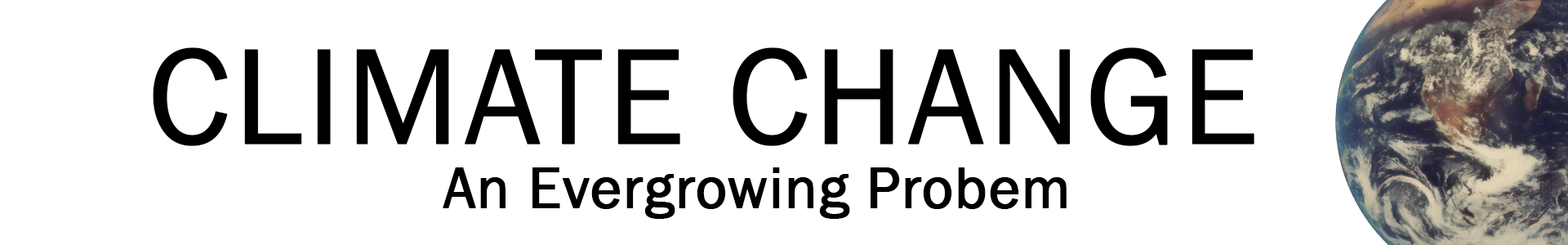
<style>
.page{position:relative;width:1568px;height:245px;background:#ffffff}
.page>*{position:absolute;margin:0}
.t1{font:141.7px "FranklinGothic-Book";color:#000000;font-weight:bold}
.t2{font:60px "FranklinGothic-Book";color:#000000;font-weight:bold}
</style>
<div class="page">
<p class="t1" style="left:153px;top:47px;width:1101px;height:99px">CLIMATE CHANGE</p>
<p class="t2" style="left:443px;top:167px;width:624px;height:52px">An Evergrowing Probem</p>
</div>
